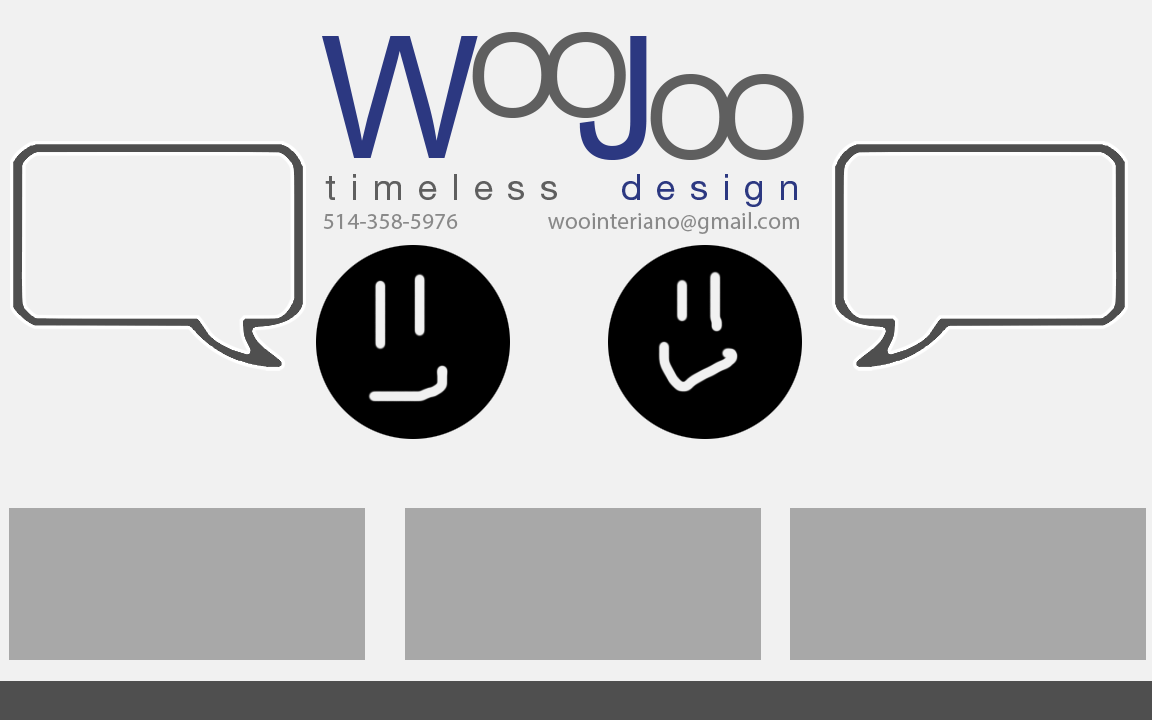
<style>
.page{position:relative;width:1152px;height:720px;background:#f1f1f1}
.page>*{position:absolute;margin:0}
.t1{font:170px "ArialMT";color:#2c3881}
.t2{font:117.1px "ArialMT";letter-spacing:-0.16em;color:#5f5f5f}
.t3{font:35.5px "HelveticaNeueLTPro-Roman";letter-spacing:0.4em;color:#5f5f5f}
.t4{font:35.5px "HelveticaNeueLTPro-Roman";letter-spacing:0.4em;color:#2c3881}
.t5{font:23.1px "MyriadPro-Regular";letter-spacing:0.01em;color:#898989}
</style>
<div class="page">
<p class="t1" style="left:322px;top:36px;width:325px;height:124px">W   J</p>
<p class="t2" style="left:472px;top:32px;width:154px;height:86px">OO</p>
<p class="t2" style="left:650px;top:74px;width:154px;height:86px">OO</p>
<p class="t3" style="left:325px;top:174px;width:472px;height:33px">timeless<span class="t4">  design</span></p>
<p class="t5" style="left:323px;top:212px;width:476px;height:22px">514-358-5976           woointeriano@gmail.com</p>
</div>
